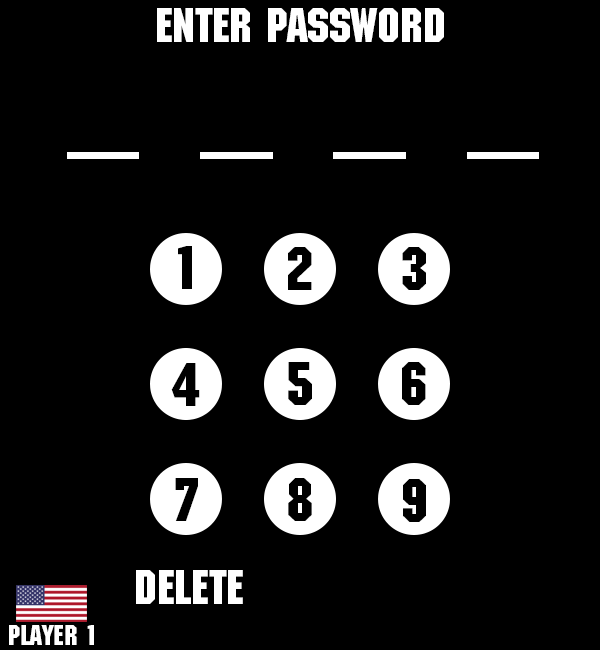
<style>
.page{position:relative;width:600px;height:650px;background:#000000}
.page>*{position:absolute;margin:0}
.t1{font:48px "MachineStd";color:#ffffff}
.t2{font:60px "MachineStd";color:#000000}
.t3{font:28.1px "MachineStd";color:#ffffff}
</style>
<div class="page">
<p class="t1" style="left:157px;top:8px;width:287px;height:34px">Enter PASSWORD</p>
<p class="t2" style="left:178px;top:246px;width:14px;height:43px">1</p>
<p class="t2" style="left:288px;top:247px;width:24px;height:43px">2</p>
<p class="t2" style="left:402px;top:247px;width:24px;height:43px">3</p>
<p class="t2" style="left:171px;top:363px;width:29px;height:43px">4</p>
<p class="t2" style="left:288px;top:362px;width:24px;height:43px">5</p>
<p class="t2" style="left:402px;top:362px;width:24px;height:43px">6</p>
<p class="t2" style="left:175px;top:478px;width:23px;height:43px">7</p>
<p class="t2" style="left:288px;top:478px;width:24px;height:43px">8</p>
<p class="t2" style="left:403px;top:479px;width:23px;height:43px">9</p>
<p class="t1" style="left:136px;top:570px;width:107px;height:34px">Delete</p>
<p class="t3" style="left:9px;top:625px;width:85px;height:20px">PLayer 1</p>
</div>
